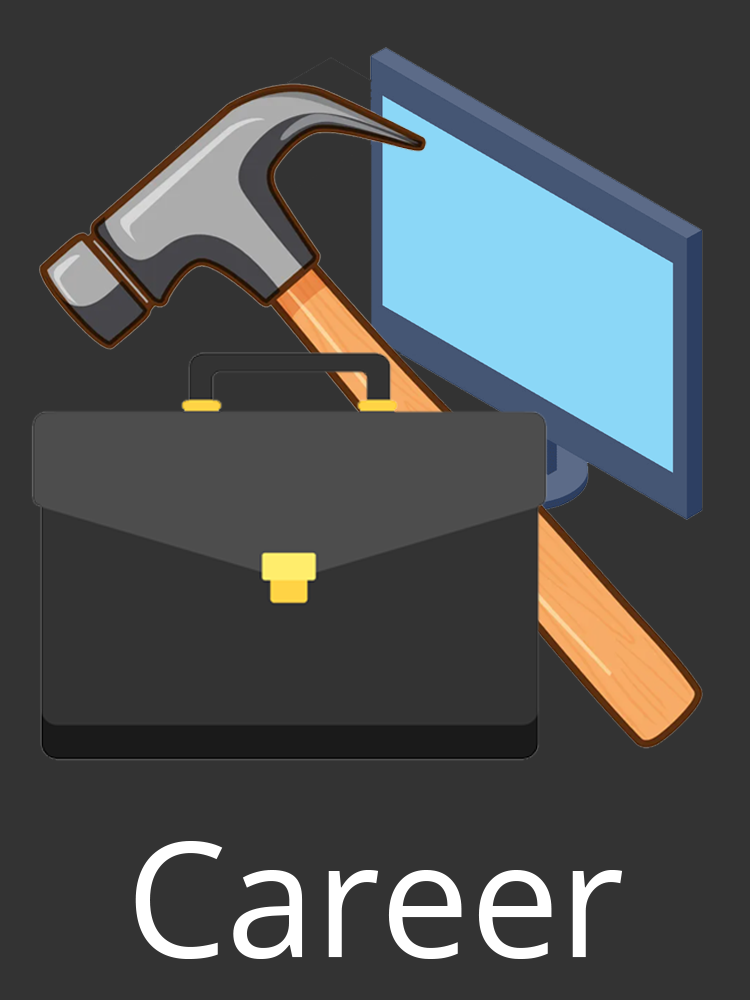
<style>
.page{position:relative;width:750px;height:1000px;background:#333333}
.page>*{position:absolute;margin:0}
.t1{font:159.6px "OpenSans";color:#ffffff}
</style>
<div class="page">
<p class="t1" style="left:135px;top:841px;width:488px;height:118px">Career</p>
</div>
